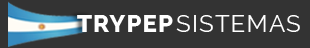
<style>
.page{position:relative;width:310px;height:48px;background:#333333}
.page>*{position:absolute;margin:0}
.t1{font:24px "Raleway-ExtraBold";letter-spacing:0.05em;color:#ffffff}
.t2{font:24px "Raleway";letter-spacing:0.05em;color:#ffffff}
</style>
<div class="page">
<p class="t1" style="left:77px;top:15px;width:96px;height:17px">TRYPEP</p>
<p class="t1" style="left:77px;top:15px;width:15px;height:17px">T</p>
<p class="t2" style="left:176px;top:15px;width:124px;height:17px">SISTEMAS</p>
</div>
